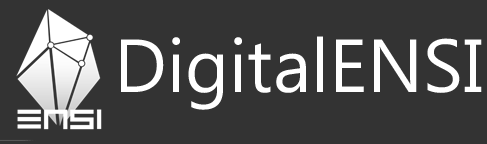
<style>
.page{position:relative;width:487px;height:144px;background:#333333}
.page>*{position:absolute;margin:0}
.t1{font:75px "MicrosoftPhagsPa";color:#ffffff}
</style>
<div class="page">
<p class="t1" style="left:121px;top:36px;width:361px;height:74px">DigitalENSI</p>
</div>
